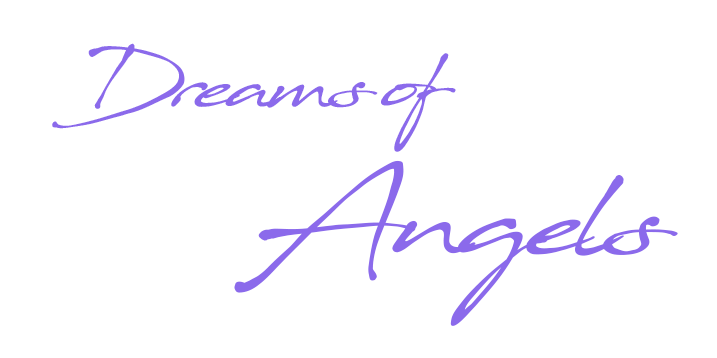
<style>
.page{position:relative;width:717px;height:358px;background:#ffffff}
.page>*{position:absolute;margin:0}
.t1{font:76px/146px "Javacom";letter-spacing:-0.1em;color:#8b6aeb}
.t2{font:115px/146px "Javacom";letter-spacing:-0.1em;color:#8b6aeb}
</style>
<div class="page">
<p class="t1" style="left:52px;top:43px;width:626px;height:283px;text-align:center">Dreams of<br>                <span class="t2">Angels</span></p>
</div>
